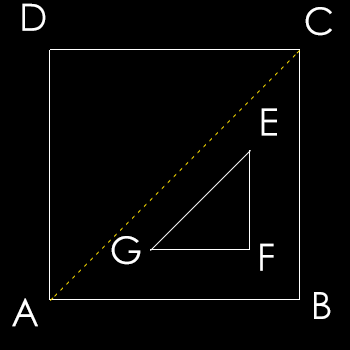
<style>
.page{position:relative;width:350px;height:350px;background:#000000}
.page>*{position:absolute;margin:0}
.t1{font:37.5px "STHeiti";color:#ffffff}
</style>
<div class="page">
<p class="t1" style="left:22px;top:3px;width:24px;height:28px">D</p>
<p class="t1" style="left:305px;top:7px;width:27px;height:29px">C</p>
<p class="t1" style="left:261px;top:108px;width:16px;height:28px">E</p>
<p class="t1" style="left:111px;top:236px;width:30px;height:29px">G</p>
<p class="t1" style="left:260px;top:243px;width:14px;height:28px">F</p>
<p class="t1" style="left:314px;top:292px;width:17px;height:27px">B</p>
<p class="t1" style="left:12px;top:298px;width:26px;height:29px">A</p>
</div>
